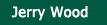
<style>
.page{position:relative;width:107px;height:25px;background:#005941}
.page>*{position:absolute;margin:0}
.t1{font:14px "Tahoma";letter-spacing:0.02em;color:#ffffff;font-weight:bold}
</style>
<div class="page">
<p class="t1" style="left:11px;top:6px;width:77px;height:15px">Jerry Wood</p>
</div>
